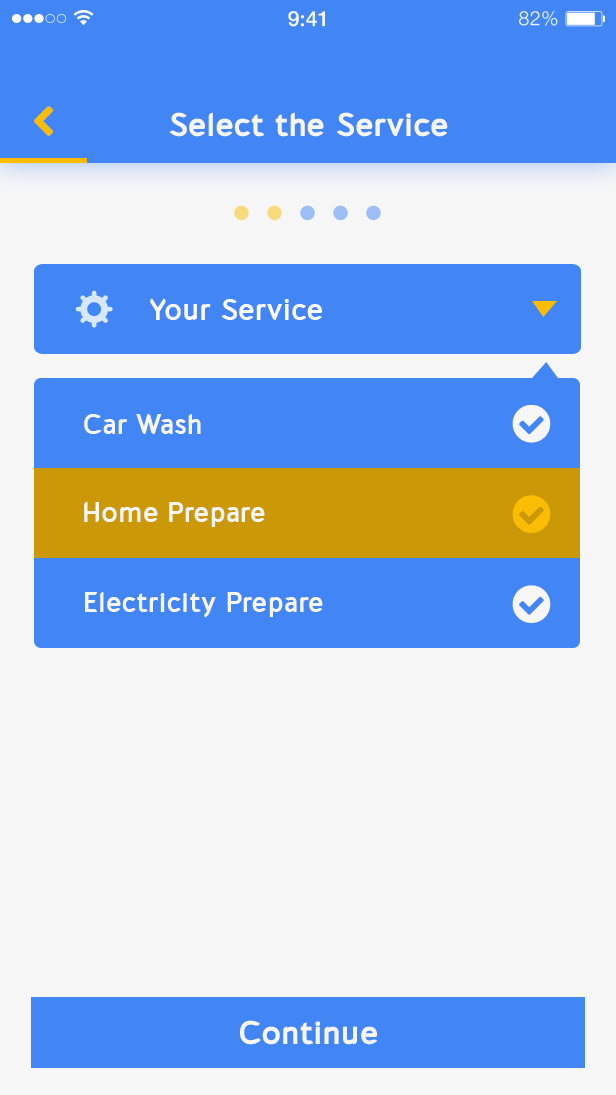
<style>
.page{position:relative;width:616px;height:1095px;background:#f6f6f6}
.page>*{position:absolute;margin:0}
.t1{font:21.3px "HelveticaNeue-Medium";color:#ffffff}
.t2{font:19.6px "HelveticaNeue-Light";letter-spacing:0.025em;color:#ffffff}
.t3{font:33px "cajitobold";color:#f6f6f6}
.t4{font:30px "cajitobold";color:#ffffff}
.t5{font:28.3px "cajitobold";color:#f6f6f6}
</style>
<div class="page">
<p class="t1" style="left:288px;top:11px;width:37px;height:16px">9:41</p>
<p class="t2" style="left:519px;top:11px;width:39px;height:15px">82%</p>
<p class="t3" style="left:169px;top:112px;width:279px;height:25px">Select the Service</p>
<p class="t4" style="left:150px;top:298px;width:172px;height:22px">Your Service</p>
<p class="t5" style="left:84px;top:414px;width:117px;height:20px">Car Wash</p>
<p class="t5" style="left:84px;top:502px;width:181px;height:25px">Home Prepare</p>
<p class="t5" style="left:85px;top:592px;width:238px;height:26px">Electricity Prepare</p>
<p class="t3" style="left:240px;top:1020px;width:137px;height:25px">Continue</p>
</div>
